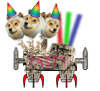
<style>
.page{position:relative;width:100px;height:91px;background:#ffffff}
.page>*{position:absolute;margin:0}
.t1{font:18px "Thor"}
</style>
<div class="page">
<p class="t1" style="left:29px;top:54px;width:41px;height:14px">PARTY</p>
</div>
